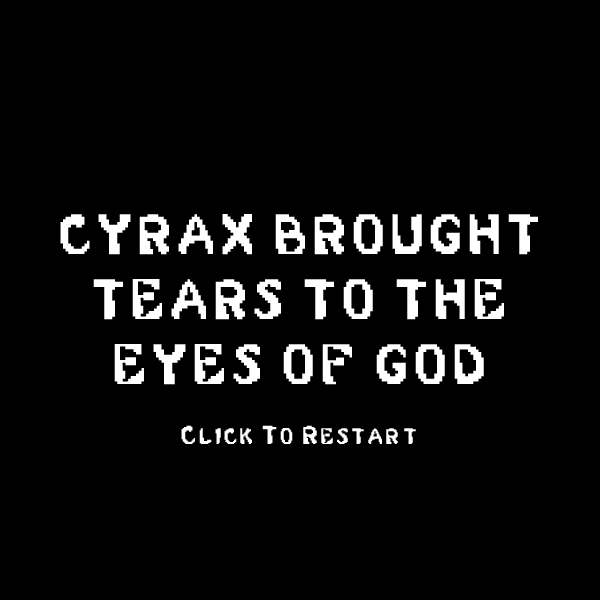
<style>
.page{position:relative;width:600px;height:600px;background:#000000}
.page>*{position:absolute;margin:0}
.t1{font:54.4px "MortalKombat2";letter-spacing:0.08em;color:#ffffff}
.t2{font:25px "MortalKombat2";letter-spacing:0.08em;color:#ffffff}
</style>
<div class="page">
<p class="t1" style="left:60px;top:214px;width:478px;height:230px;text-align:center">CYRAX BROUGHT TEARS TO THE EYES OF GOD<br><span class="t2"><br>Click To Restart</span></p>
</div>
